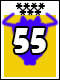
<style>
.page{position:relative;width:60px;height:80px;background:#f2ce06}
.page>*{position:absolute;margin:0}
.t1{font:16.7px "ShowcardGothic-Reg";color:#000000}
.t2{font:33.3px "ShowcardGothic-Reg";color:#ffffff}
</style>
<div class="page">
<p class="t1" style="left:15px;top:2px;width:30px;height:8px">****</p>
<p class="t1" style="left:19px;top:8px;width:23px;height:8px">***</p>
<p class="t2" style="left:13px;top:28px;width:33px;height:25px">55</p>
</div>
